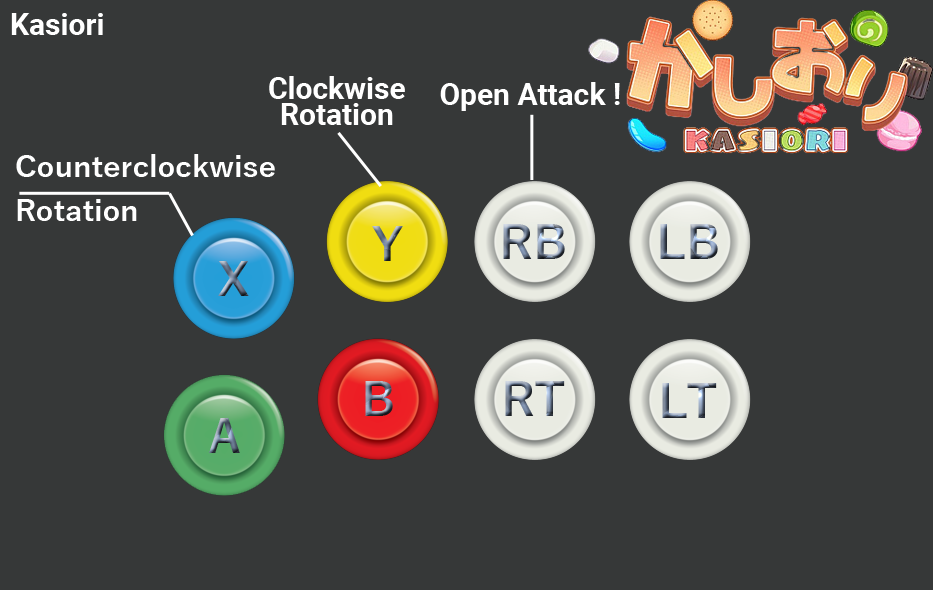
<style>
.page{position:relative;width:933px;height:590px;background:#363838}
.page>*{position:absolute;margin:0}
.t1{font:30px "Roboto-Bold";color:#ffffff}
.t2{font:30px/26px "Roboto-Bold";color:#ffffff}
.t3{font:30px/44px "YuGothic-Bold";color:#ffffff}
</style>
<div class="page">
<p class="t1" style="left:11px;top:13px;width:92px;height:22px">Kasiori</p>
<p class="t2" style="left:269px;top:76px;width:136px;height:49px;text-align:center">Clockwise<br>Rotation</p>
<p class="t1" style="left:440px;top:82px;width:180px;height:29px">Open Attack !</p>
<p class="t3" style="left:16px;top:154px;width:259px;height:67px">Counterclockwise<br>Rotation</p>
</div>
